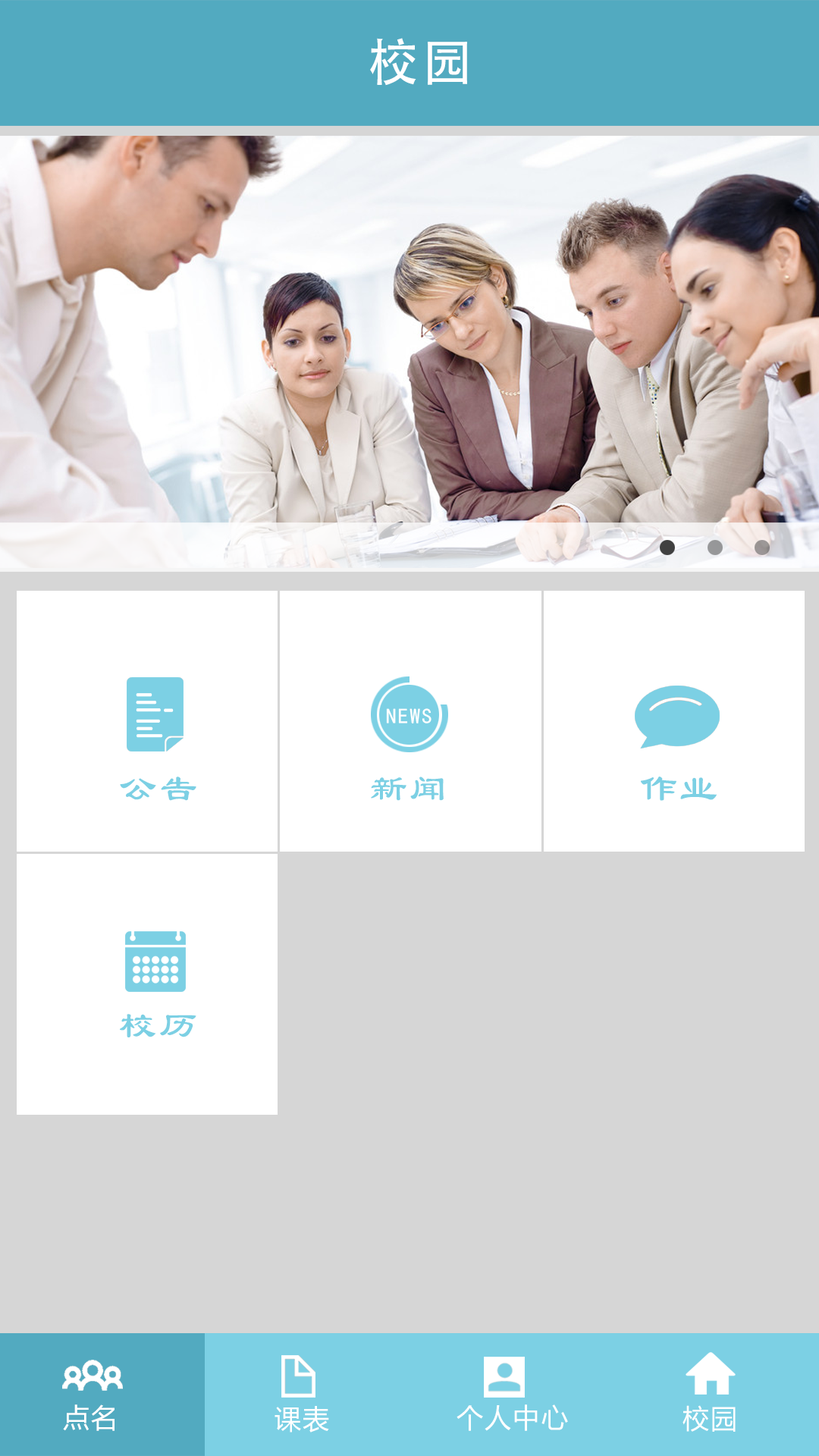
<style>
.page{position:relative;width:819px;height:1456px;background:#d6d6d6}
.page>*{position:absolute;margin:0}
.t1{font:50.8px "AdobeHeitiStd-Regular";letter-spacing:0.06em;color:#ffffff}
.t2{font:21.2px "SimHei";letter-spacing:0.06em;color:#ffffff}
.t3{font:37.9px "LiSu";letter-spacing:0.06em;color:#7cd0e4}
.t4{font:26.9px "MicrosoftYaHei";letter-spacing:0.06em;color:#ffffff}
</style>
<div class="page">
<p class="t1" style="left:370px;top:38px;width:97px;height:48px">校园</p>
<p class="t2" style="left:386px;top:708px;width:45px;height:15px">NEWS</p>
<p class="t3" style="left:120px;top:777px;width:76px;height:24px">公告</p>
<p class="t3" style="left:371px;top:777px;width:73px;height:24px">新闻</p>
<p class="t3" style="left:641px;top:777px;width:76px;height:24px">作业</p>
<p class="t3" style="left:120px;top:1014px;width:76px;height:23px">校历</p>
<p class="t4" style="left:63px;top:1404px;width:52px;height:27px">点名</p>
<p class="t4" style="left:275px;top:1406px;width:54px;height:26px">课表</p>
<p class="t4" style="left:457px;top:1404px;width:111px;height:27px">个人中心</p>
<p class="t4" style="left:682px;top:1405px;width:54px;height:27px">校园</p>
</div>
